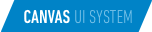
<style>
.page{position:relative;width:152px;height:32px;background:#0083c7}
.page>*{position:absolute;margin:0}
.t1{font:19px "DINNextLTPro-LightCondensed";color:#75c0e7;text-transform:uppercase}
.t2{font:19px "DINNextLTPro-MediumCond";color:#ffffff;text-transform:uppercase}
</style>
<div class="page">
<p class="t1" style="left:24px;top:9px;width:108px;height:15px"><span class="t2">Canvas </span>UI System</p>
</div>
